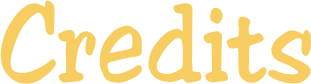
<style>
.page{position:relative;width:311px;height:84px;background:#ffffff}
.page>*{position:absolute;margin:0}
.t1{font:109px "Jester-Regular";color:#f7cd61;scale:0.94 1}
</style>
<div class="page">
<p class="t1" style="left:0px;top:0px;width:311px;height:84px">Credits</p>
</div>
